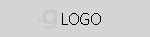
<style>
.page{position:relative;width:150px;height:37px;background:#d4d4d4}
.page>*{position:absolute;margin:0}
.t1{font:16.7px "MyriadPro-Regular";color:#000000}
</style>
<div class="page">
<p class="t1" style="left:62px;top:13px;width:39px;height:12px">LOGO</p>
</div>
